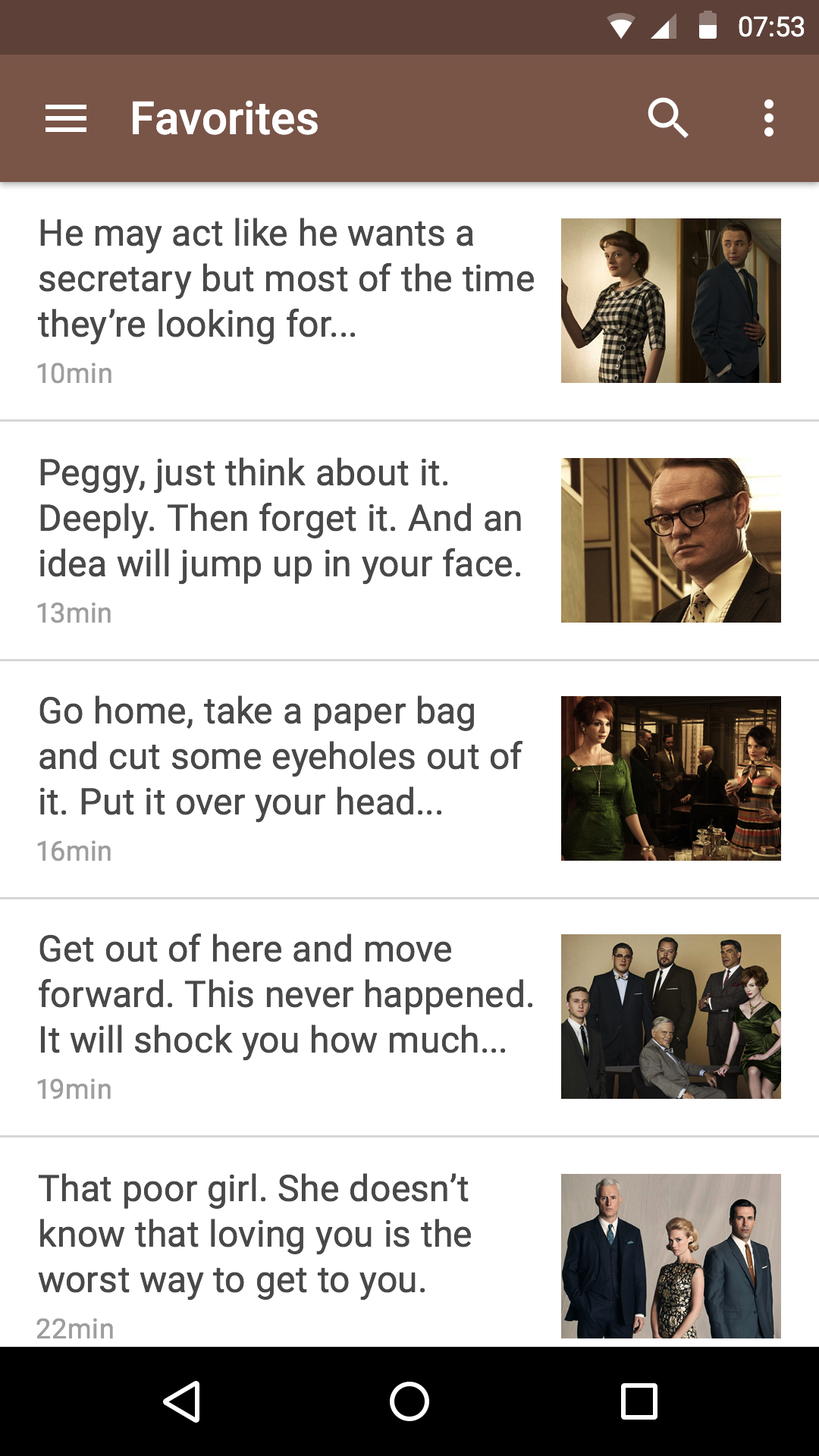
<style>
.page{position:relative;width:819px;height:1456px;background:#ffffff}
.page>*{position:absolute;margin:0}
.t1{font:27.3px "Roboto-Regular";color:#ffffff}
.t2{font:45.5px "Roboto-Medium";letter-spacing:0.005em;color:#ffffff}
.t3{font:36.4px/45.5px "Roboto-Regular";letter-spacing:0.01em;color:#494949}
.t4{font:27.3px "Roboto-Regular";letter-spacing:0.02em;color:#9e9e9e}
</style>
<div class="page">
<p class="t1" style="left:739px;top:16px;width:66px;height:21px">07:53</p>
<p class="t2" style="left:133px;top:100px;width:185px;height:35px">Favorites</p>
<p class="t3" style="left:37px;top:218px;width:497px;height:127px">He may act like he wants a secretary but most of the time they’re looking for...</p>
<p class="t4" style="left:37px;top:362px;width:74px;height:22px">10min</p>
<p class="t3" style="left:40px;top:457px;width:481px;height:128px">Peggy, just think about it. Deeply. Then forget it. And an idea will jump up in your face.</p>
<p class="t4" style="left:37px;top:602px;width:74px;height:21px">13min</p>
<p class="t3" style="left:39px;top:695px;width:484px;height:128px">Go home, take a paper bag and cut some eyeholes out of it. Put it over your head...</p>
<p class="t4" style="left:37px;top:840px;width:74px;height:21px">16min</p>
<p class="t3" style="left:39px;top:933px;width:494px;height:128px">Get out of here and move forward. This never happened. It will shock you how much...</p>
<p class="t4" style="left:37px;top:1078px;width:74px;height:21px">19min</p>
<p class="t3" style="left:38px;top:1173px;width:433px;height:128px">That poor girl. She doesn’t know that loving you is the worst way to get to you.</p>
<p class="t4" style="left:36px;top:1318px;width:77px;height:20px">22min</p>
</div>
